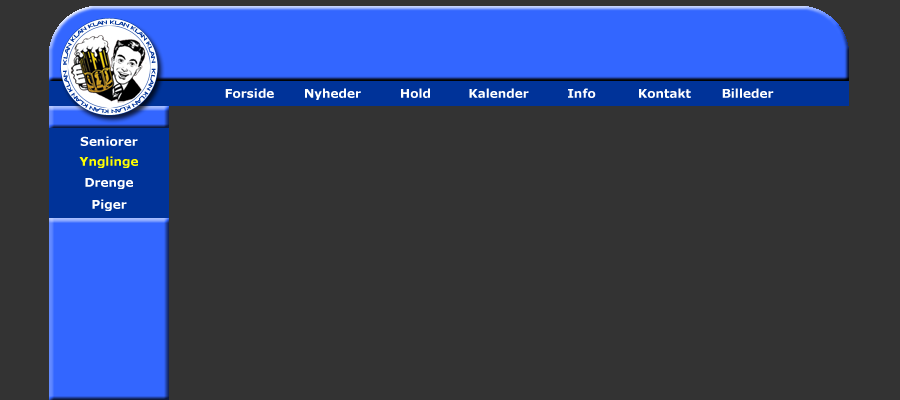
<style>
.page{position:relative;width:900px;height:400px;background:#333333}
.page>*{position:absolute;margin:0}
.t1{font:12px "Verdana-Bold";color:#ffffff}
.t2{font:12px "Verdana-Bold";color:#ffff00}
</style>
<div class="page">
<p class="t1" style="left:225px;top:88px;width:49px;height:10px">Forside</p>
<p class="t1" style="left:305px;top:88px;width:56px;height:12px">Nyheder</p>
<p class="t1" style="left:401px;top:88px;width:29px;height:10px">Hold</p>
<p class="t1" style="left:469px;top:88px;width:60px;height:10px">Kalender</p>
<p class="t1" style="left:568px;top:88px;width:28px;height:10px">Info</p>
<p class="t1" style="left:639px;top:88px;width:52px;height:10px">Kontakt</p>
<p class="t1" style="left:722px;top:88px;width:52px;height:10px">Billeder</p>
<p class="t1" style="left:80px;top:136px;width:58px;height:10px">Seniorer</p>
<p class="t2" style="left:79px;top:156px;width:59px;height:12px">Ynglinge</p>
<p class="t1" style="left:85px;top:178px;width:48px;height:11px">Drenge</p>
<p class="t1" style="left:92px;top:199px;width:35px;height:12px">Piger</p>
</div>
